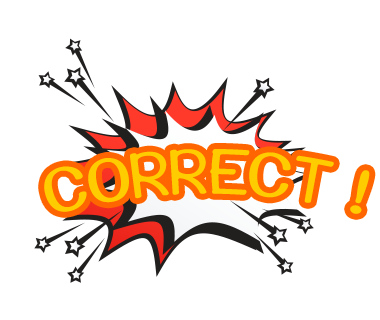
<style>
.page{position:relative;width:380px;height:320px;background:#ffffff}
.page>*{position:absolute;margin:0}
.t1{font:62.5px "JuanMikes-Regular";color:#ffcc00}
</style>
<div class="page">
<p class="t1" style="left:44px;top:149px;width:326px;height:65px">CORRECT !</p>
</div>
